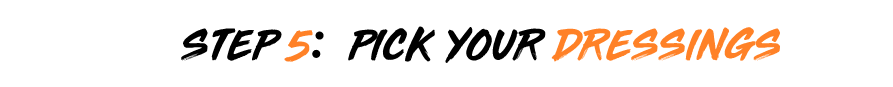
<style>
.page{position:relative;width:893px;height:87px;background:#ffffff}
.page>*{position:absolute;margin:0}
.t1{font:40.2px "ThirdRail";letter-spacing:0.04em;color:#000000}
.t2{font:40.2px "ThirdRail";letter-spacing:0.04em;color:#ff8127}
.t3{font:65.3px "BodoniMT";letter-spacing:0.04em;color:#000000}
</style>
<div class="page">
<p class="t1" style="left:181px;top:26px;width:599px;height:37px">STEP<span class="t2"> 5   </span>PICK YOUR<span class="t2"> DRESSINGS</span></p>
<p class="t3" style="left:312px;top:31px;width:12px;height:27px;rotate:10deg">:</p>
</div>
